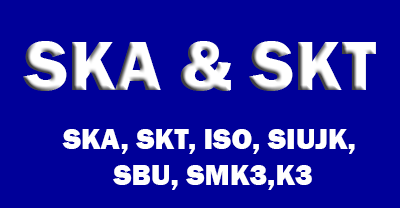
<style>
.page{position:relative;width:400px;height:208px;background:#000099}
.page>*{position:absolute;margin:0}
.t1{font:72px "FranklinGothic-Heavy";color:#ffffff}
.t2{font:30px "FranklinGothic-Heavy";color:#ffffff}
</style>
<div class="page">
<p class="t1" style="left:23px;top:41px;width:353px;height:50px">SKA &amp; SKT</p>
<p class="t2" style="left:62px;top:129px;width:293px;height:61px;text-align:center">SKA, SKT, ISO, SIUJK, <br>SBU, SMK3,K3</p>
</div>
